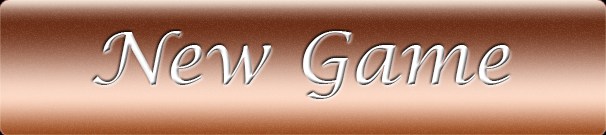
<style>
.page{position:relative;width:606px;height:135px}
.page>*{position:absolute;margin:0}
.t1{font:72px "LucidaCalligraphy-Italic";color:#ffffff}
</style>
<div class="page">
<p class="t1" style="left:92px;top:31px;width:418px;height:68px">New Game</p>
</div>
